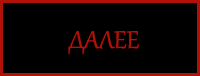
<style>
.page{position:relative;width:200px;height:76px;background:#000000}
.page>*{position:absolute;margin:0}
.t1{font:30px "Gabriola";color:#b01207;text-transform:uppercase}
</style>
<div class="page">
<p class="t1" style="left:68px;top:31px;width:71px;height:24px">Далее</p>
</div>
